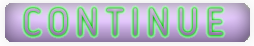
<style>
.page{position:relative;width:254px;height:46px}
.page>*{position:absolute;margin:0}
.t1{font:37.5px "BloggerSans";letter-spacing:0.2em}
</style>
<div class="page">
<p class="t1" style="left:24px;top:8px;width:199px;height:28px">CONTINUE</p>
</div>
